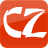
<style>
.page{position:relative;width:48px;height:48px;background:#e45937}
.page>*{position:absolute;margin:0}
.t1{font:42px "Ftiebihei";color:#ffffff;font-weight:bold}
</style>
<div class="page">
<p class="t1" style="left:3px;top:7px;width:44px;height:31px">CZ</p>
</div>
